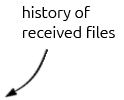
<style>
.page{position:relative;width:124px;height:100px;background:#ffffff}
.page>*{position:absolute;margin:0}
.t1{font:16px "Ubuntu-Light";color:#000000}
</style>
<div class="page">
<p class="t1" style="left:23px;top:6px;width:92px;height:32px">history of <br>received files</p>
</div>
